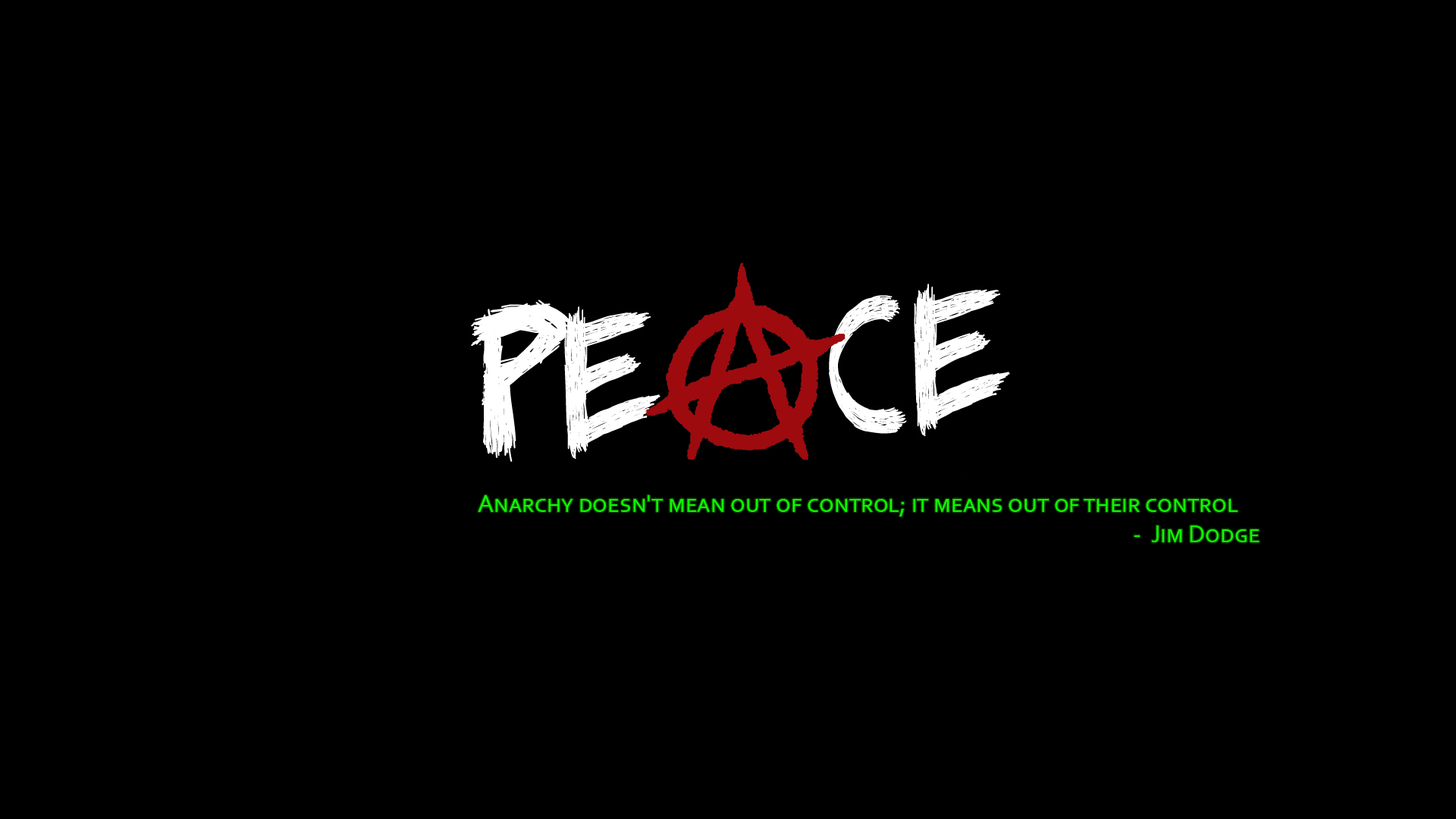
<style>
.page{position:relative;width:1456px;height:819px;background:#000000}
.page>*{position:absolute;margin:0}
.t1{font:25px "Corbel";color:#0cff00;font-variant:small-caps}
</style>
<div class="page">
<p class="t1" style="left:478px;top:495px;width:782px;height:47px">Anarchy doesn't mean out of control; it means out of their control<br>                         -  Jim Dodge</p>
</div>
